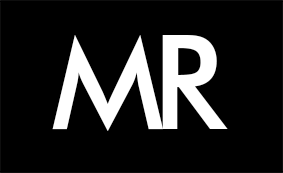
<style>
.page{position:relative;width:283px;height:173px;background:#000000}
.page>*{position:absolute;margin:0}
.t1{font:131.4px "FuturaBT-Medium";color:#ffffff}
</style>
<div class="page">
<p class="t1" style="left:52px;top:35px;width:111px;height:96px">M</p>
<p class="t1" style="left:162px;top:35px;width:66px;height:94px">R</p>
</div>
